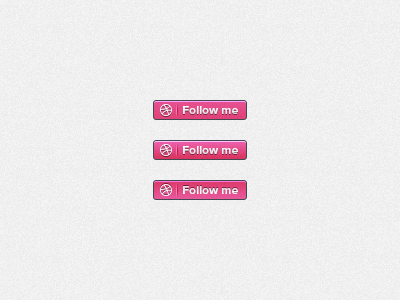
<style>
.page{position:relative;width:400px;height:300px}
.page>*{position:absolute;margin:0}
.t1{font:12px "ProximaNova-Bold";color:#ffffff}
</style>
<div class="page">
<p class="t1" style="left:183px;top:106px;width:55px;height:8px">Follow me</p>
<p class="t1" style="left:183px;top:146px;width:55px;height:8px">Follow me</p>
<p class="t1" style="left:183px;top:186px;width:55px;height:8px">Follow me</p>
</div>
